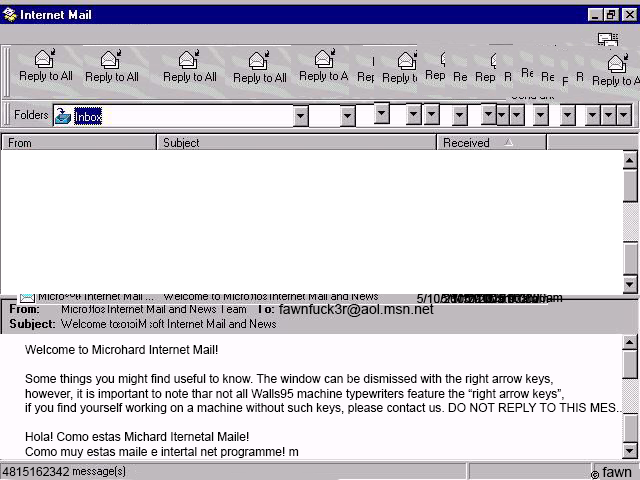
<style>
.page{position:relative;width:640px;height:480px;background:#ffffff}
.page>*{position:absolute;margin:0}
.t1{font:12px "ArialMT";color:#000000}
</style>
<div class="page">
<p class="t1" style="left:25px;top:345px;width:597px;height:113px">Welcome to Microhard Internet Mail!<br><br>Some things you might find useful to know. The window can be dismissed with the right arrow keys,<br>however, it is important to note thar not all Walls95 machine typewriters feature the “right arrow keys”,<br>if you find yourself working on a machine without such keys, please contact us. DO NOT REPLY TO THIS MES..<br><br>Hola! Como estas Michard Iternetal Maile!<br>Como muy estas maile e intertal net programme! m</p>
</div>
